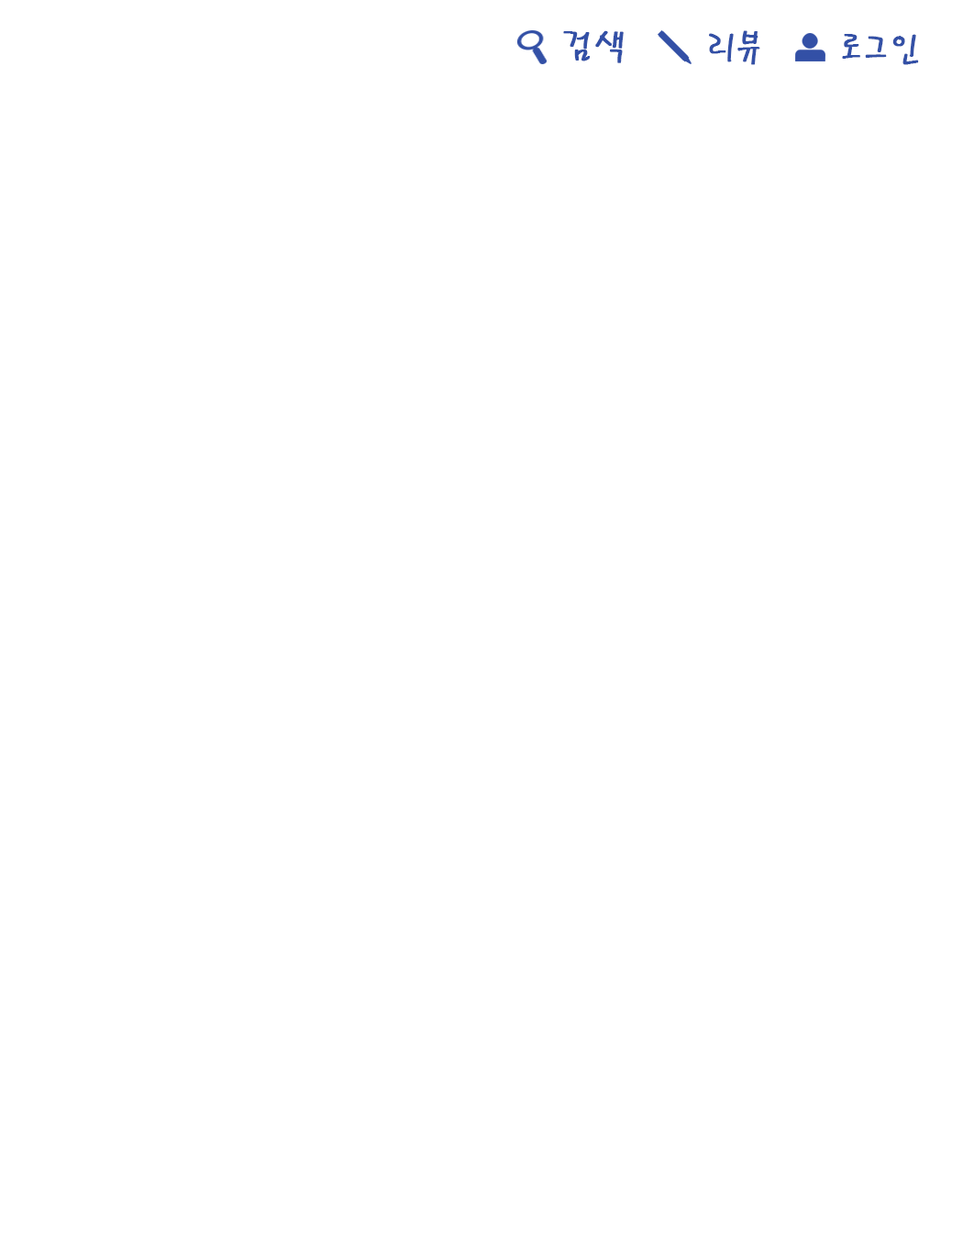
<style>
.page{position:relative;width:963px;height:1238px;background:#ffffff}
.page>*{position:absolute;margin:0}
.t1{font:36.7px "PyunjiR-HM";letter-spacing:-0.025em;color:#3350a6;font-weight:bold}
</style>
<div class="page">
<p class="t1" style="left:563px;top:30px;width:61px;height:33px">검색</p>
<p class="t1" style="left:709px;top:30px;width:51px;height:35px">리뷰</p>
<p class="t1" style="left:842px;top:34px;width:77px;height:31px">로그인</p>
</div>
